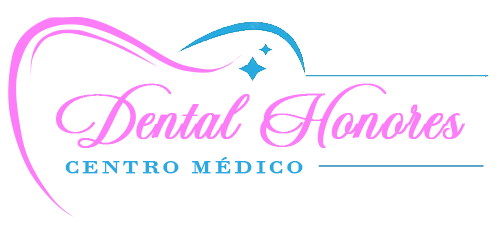
<style>
.page{position:relative;width:503px;height:242px;background:#ffffff}
.page>*{position:absolute;margin:0}
.t1{font:62.7px "Nathalia";color:#fd7cf8;font-weight:bold;scale:1.08 1}
.t2{font:18.3px "BodoniMT";letter-spacing:0.1em;color:#28a9e1;font-weight:bold;scale:1.31 1}
</style>
<div class="page">
<p class="t1" style="left:56px;top:83px;width:409px;height:65px">Dental Honores</p>
<p class="t2" style="left:65px;top:157px;width:238px;height:17px">CENTRO MÉDICO</p>
</div>
